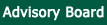
<style>
.page{position:relative;width:107px;height:25px;background:#005941}
.page>*{position:absolute;margin:0}
.t1{font:14px "Tahoma";letter-spacing:0.02em;color:#ffffff;font-weight:bold}
</style>
<div class="page">
<p class="t1" style="left:2px;top:6px;width:102px;height:15px">Advisory Board</p>
</div>
